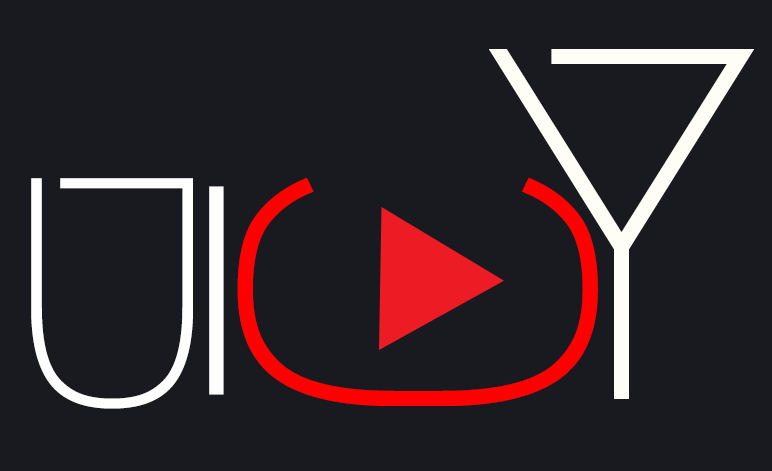
<style>
.page{position:relative;width:772px;height:471px;background:#191a1f}
.page>*{position:absolute;margin:0}
.t1{font:500px "Megrim";color:#fffef6}
.t2{font:323.8px "Megrim";color:#ffffff;scale:1.07 1}
.t3{font:500px "Megrim";color:#ff0000}
.t4{font:358.1px "Megrim";color:#fffefe;scale:1.33 1}
</style>
<div class="page">
<p class="t1" style="left:489px;top:49px;width:265px;height:350px">Y</p>
<p class="t2" style="left:31px;top:178px;width:162px;height:231px">U</p>
<p class="t3" style="left:237px;top:178px;width:361px;height:228px;rotate:-90deg">C</p>
<p class="t4" style="left:209px;top:186px;width:15px;height:209px">i</p>
</div>
